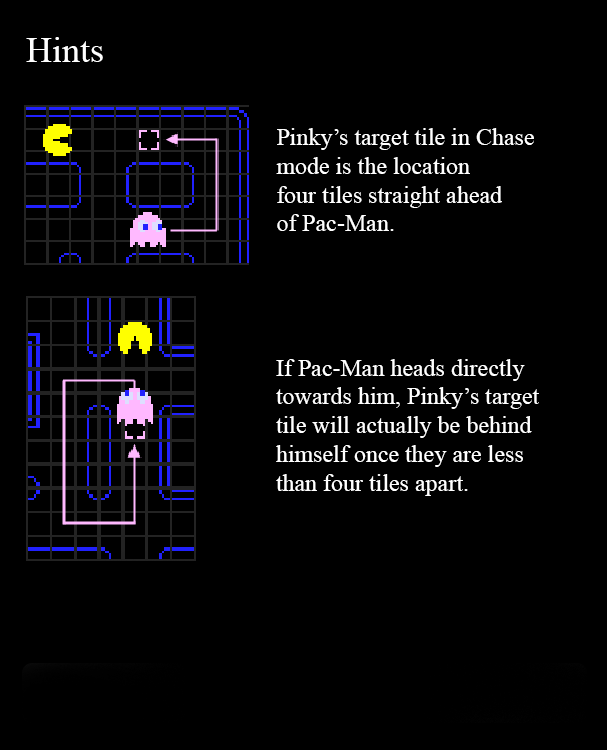
<style>
.page{position:relative;width:607px;height:750px;background:#000000}
.page>*{position:absolute;margin:0}
.t1{font:24px "TimesNewRomanPSMT";color:#ffffff}
</style>
<div class="page">
<p class="t1" style="left:276px;top:128px;width:258px;height:103px">Pinky’s target tile in Chase<br>mode is the location <br>four tiles straight ahead<br>of Pac-Man.</p>
<p class="t1" style="left:276px;top:359px;width:263px;height:137px">If Pac-Man heads directly<br>towards him, Pinky’s target<br>tile will actually be behind<br>himself once they are less<br>than four tiles apart.</p>
</div>
